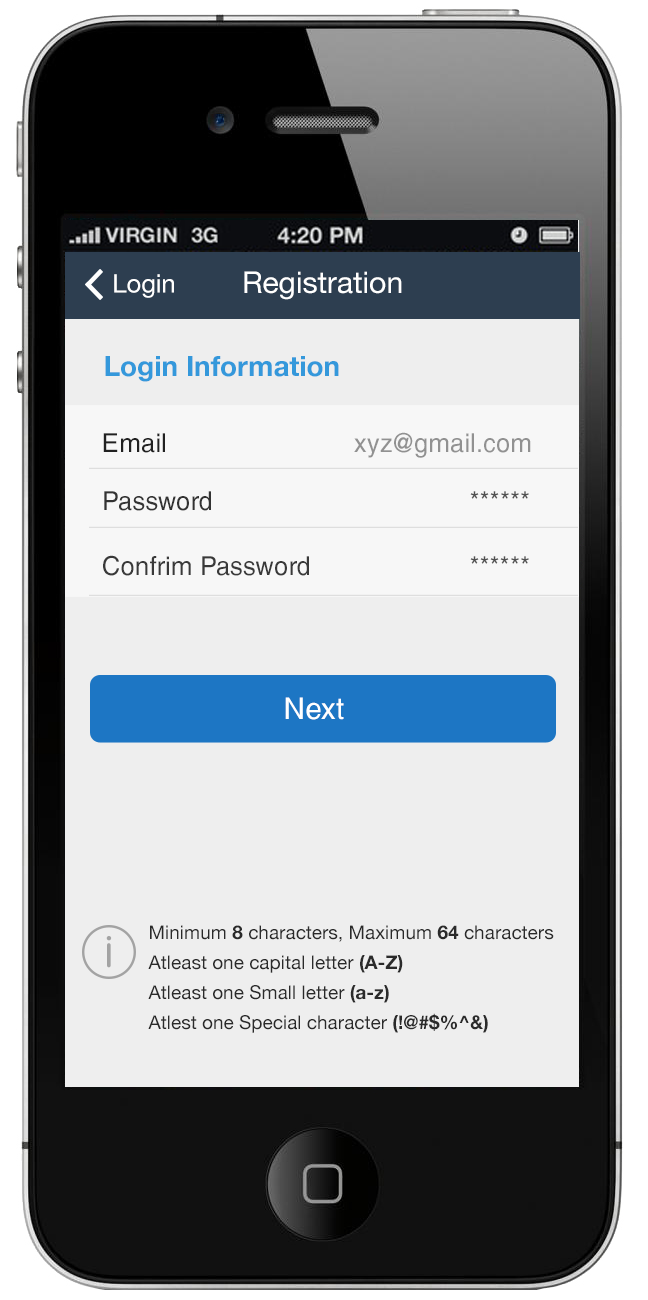
<style>
.page{position:relative;width:648px;height:1300px;background:#eeeeee}
.page>*{position:absolute;margin:0}
.t1{font:25.5px "HelveticaNeue";color:#ffffff}
.t2{font:30px "HelveticaNeue";color:#ffffff}
.t3{font:28px "HelveticaNeue-Bold";color:#3498db}
.t4{font:26px "HelveticaCyr-Upright";color:#919191}
.t5{font:26px "HelveticaCyr-Upright";color:#212121}
.t6{font:26px "HelveticaCyr-Upright";color:#333333}
.t7{font:26px "HelveticaCyr-Upright";color:#505050}
.t8{font:26px "HelveticaCyr-Upright";color:#393939}
.t9{font:30px "HelveticaCyr-Upright";color:#ffffff}
.t10{font:19px/30px "HelveticaNeue";color:#2a2a2a}
.t11{font:19px/30px "HelveticaNeue-Bold";color:#2a2a2a}
</style>
<div class="page">
<p class="t1" style="left:114px;top:274px;width:60px;height:24px">Login</p>
<p class="t2" style="left:244px;top:271px;width:158px;height:29px">Registration</p>
<p class="t3" style="left:105px;top:356px;width:234px;height:26px">Login Information</p>
<p class="t4" style="left:103px;top:432px;width:428px;height:26px"><span class="t5">Email      </span>xyz@gmail.com</p>
<p class="t6" style="left:104px;top:491px;width:425px;height:20px">Password<span class="t7">                ******</span></p>
<p class="t8" style="left:103px;top:555px;width:426px;height:21px">Confrim Password <span class="t7">         ******</span></p>
<p class="t9" style="left:285px;top:697px;width:59px;height:23px">Next</p>
<p class="t10" style="left:148px;top:925px;width:406px;height:108px">Minimum <span class="t11">8</span> characters, Maximum <span class="t11">64</span> characters<br>Atleast one capital letter <span class="t11">(A-Z)<br></span>Atleast one Small letter <span class="t11">(a-z)<br></span>Atlest one Special character <span class="t11">(!@#$%^&amp;)</span></p>
</div>
